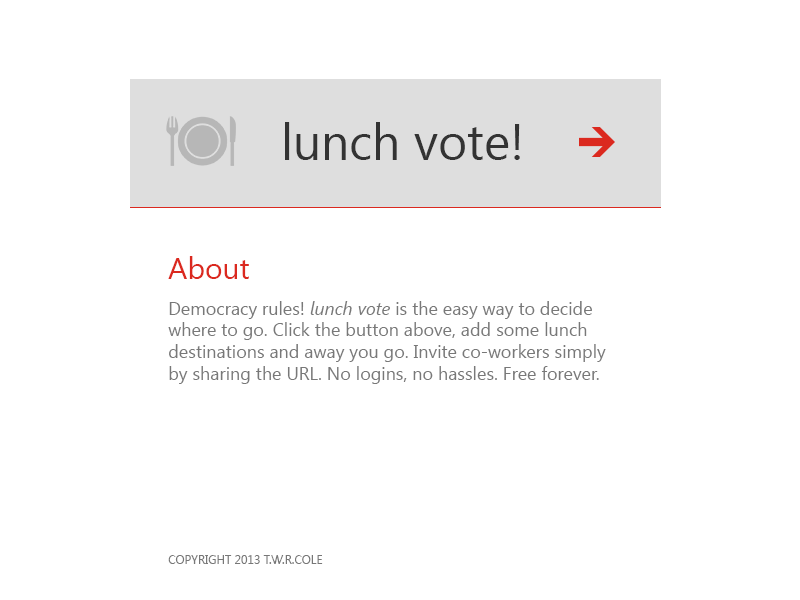
<style>
.page{position:relative;width:800px;height:600px;background:#ffffff}
.page>*{position:absolute;margin:0}
.t1{font:50px "SegoeUI";color:#333333}
.t2{font:30px "SegoeUI";color:#db291f}
.t3{font:18px "SegoeUI";color:#787878}
.t4{font:18px "SegoeUI-Italic";color:#787878}
.t5{font:12px "SegoeUI";color:#777777}
</style>
<div class="page">
<p class="t1" style="left:285px;top:122px;width:235px;height:38px">lunch vote!</p>
<p class="t2" style="left:168px;top:256px;width:81px;height:23px">About</p>
<p class="t3" style="left:168px;top:301px;width:438px;height:83px">Democracy rules! <span class="t4">lunch vote</span> is the easy way to decide<br>where to go. Click the button above, add some lunch<br>destinations and away you go. Invite co-workers simply<br>by sharing the URL. No logins, no hassles. Free forever.</p>
<p class="t5" style="left:168px;top:555px;width:155px;height:9px">COPYRIGHT 2013 T.W.R.COLE</p>
</div>
